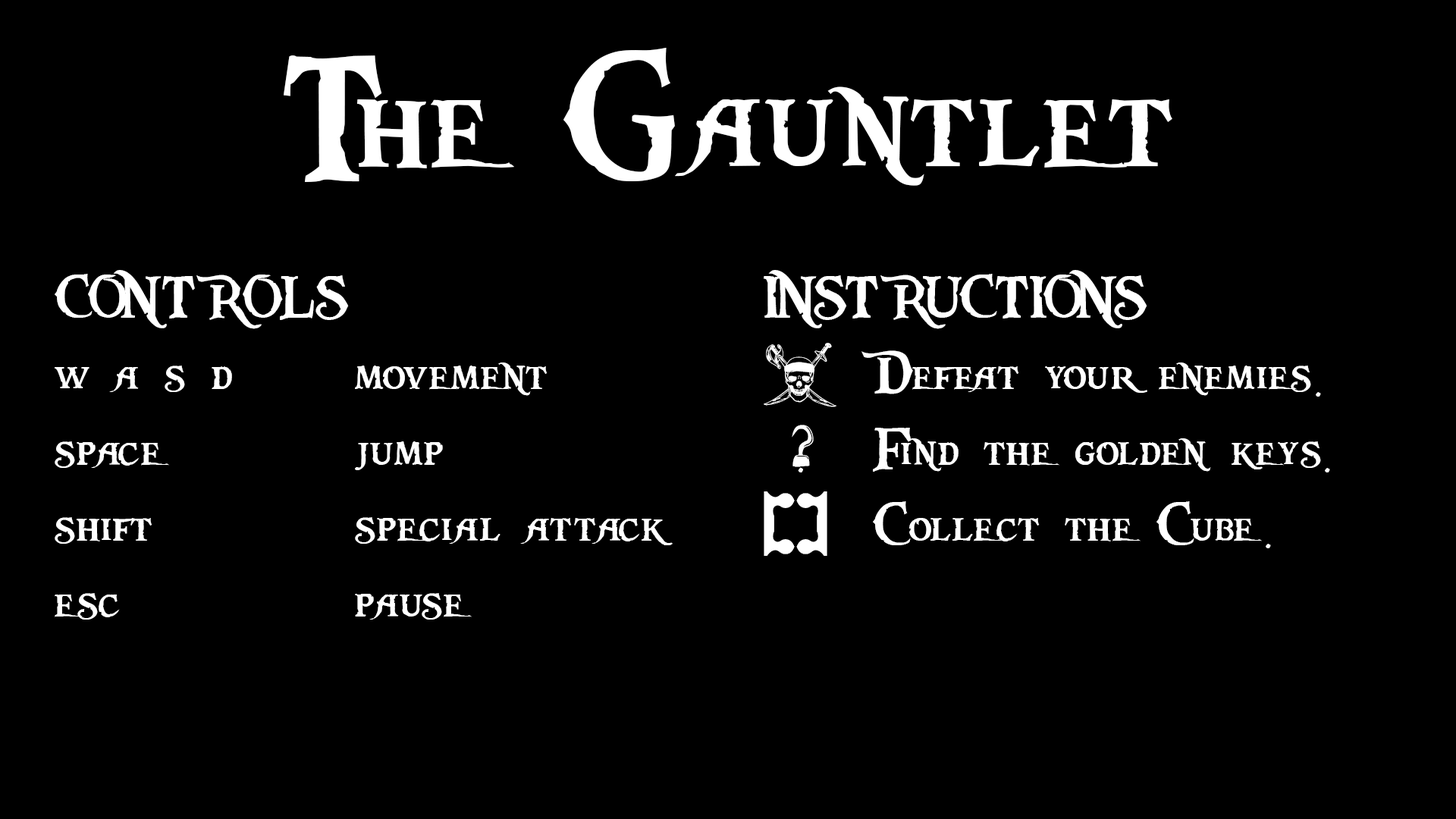
<style>
.page{position:relative;width:1456px;height:819px;background:#000000}
.page>*{position:absolute;margin:0}
.t1{font:189.6px "PiecesofEight";color:#ffffff}
.t2{font:63.2px "PiecesofEight";color:#ffffff}
</style>
<div class="page">
<p class="t1" style="left:284px;top:48px;width:888px;height:138px">The Gauntlet</p>
<p class="t2" style="left:55px;top:270px;width:618px;height:350px">CONTROLS<br>w a s d     movement<br>space        jump<br>shift        special attack<br>esc         pause</p>
<p class="t2" style="left:764px;top:270px;width:566px;height:286px">INSTRUCTIONS<br>$  Defeat your enemies.<br> ?  Find the golden keys.<br>[]  Collect the Cube.</p>
</div>
